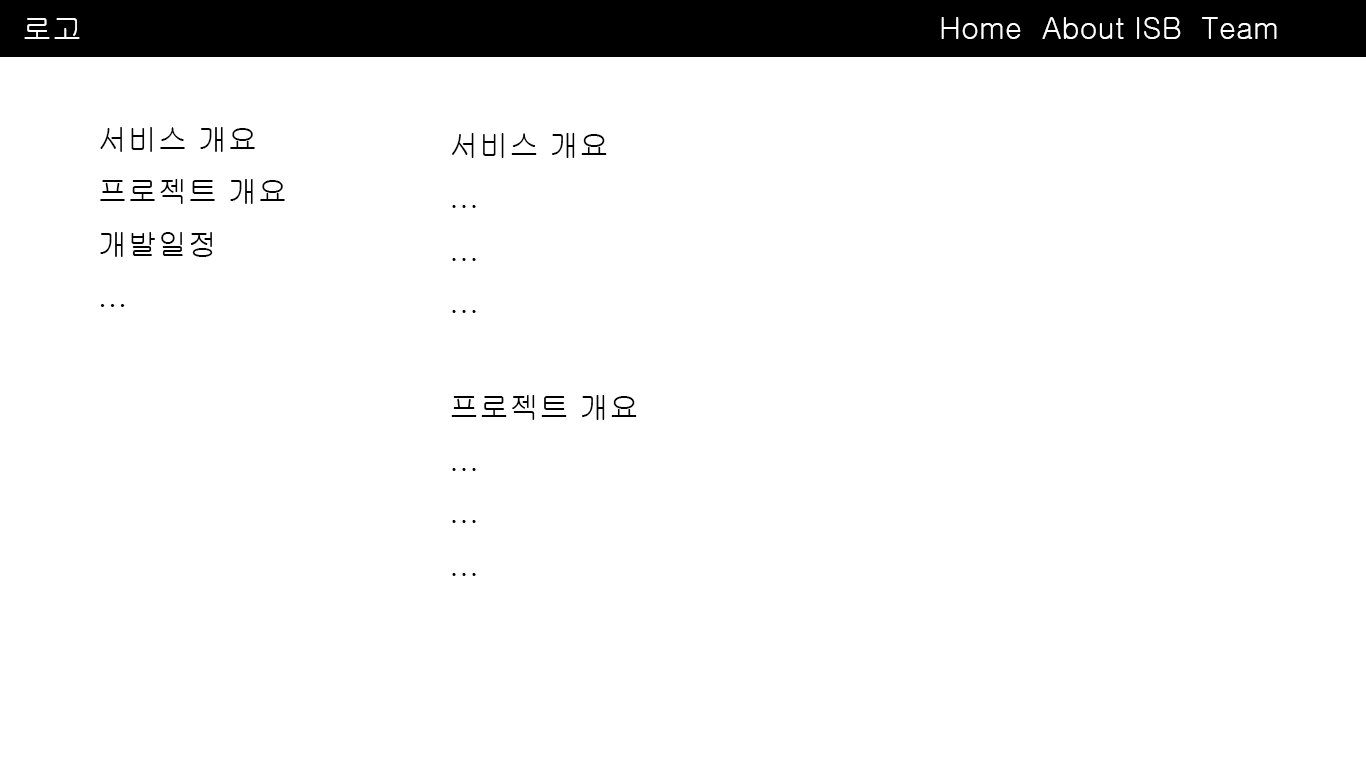
<style>
.page{position:relative;width:1366px;height:768px;background:#ffffff}
.page>*{position:absolute;margin:0}
.t1{font:30px "Gulim";color:#ffffff}
.t2{font:30px "Gulim";color:#000000}
</style>
<div class="page">
<p class="t1" style="left:941px;top:17px;width:336px;height:22px">Home  About ISB  Team</p>
<p class="t1" style="left:24px;top:18px;width:56px;height:21px">로고</p>
<p class="t2" style="left:100px;top:127px;width:185px;height:180px">서비스 개요<br>프로젝트 개요<br>개발일정<br>...</p>
<p class="t2" style="left:451px;top:133px;width:186px;height:443px">서비스 개요<br>...<br>...<br>...<br><br>프로젝트 개요<br>...<br>...<br>...</p>
</div>
